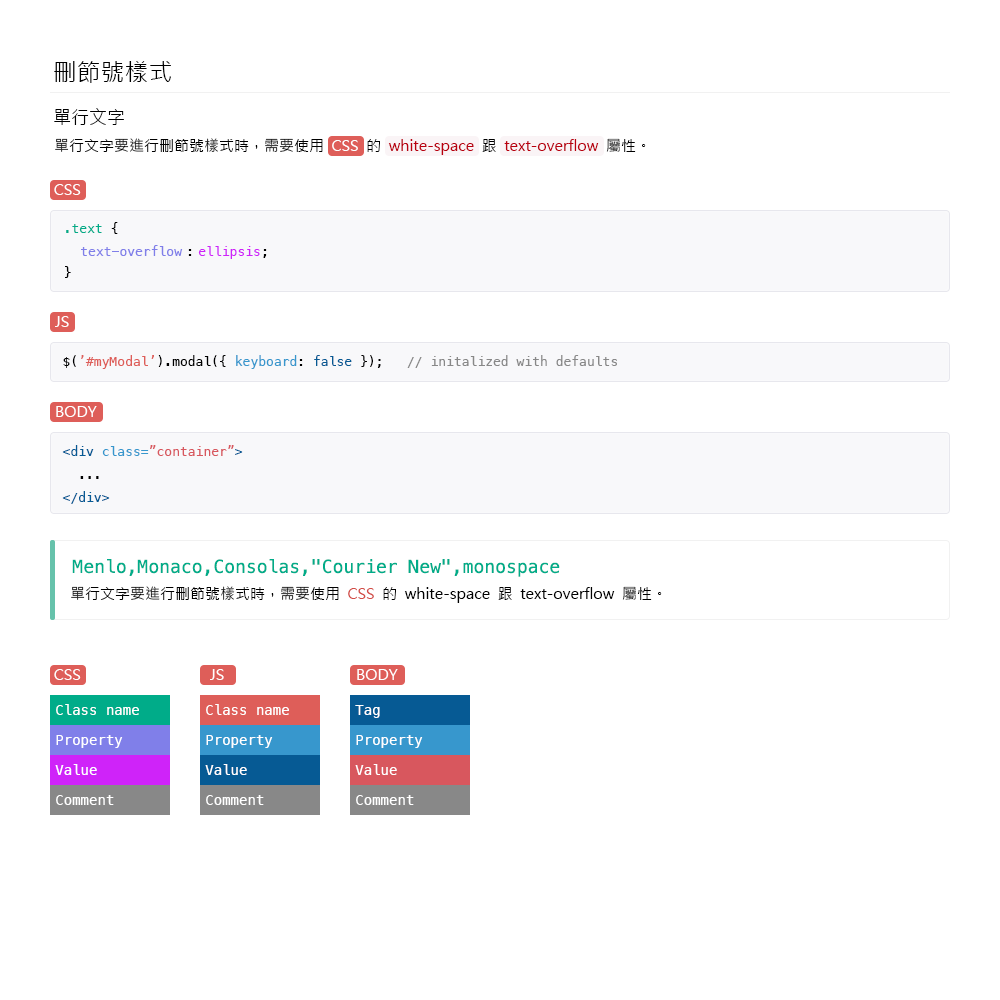
<style>
.page{position:relative;width:1000px;height:1000px;background:#ffffff}
.page>*{position:absolute;margin:0}
.t1{font:24px "MicrosoftJhengHeiRegular";color:#000000}
.t2{font:18px "MicrosoftJhengHeiRegular";color:#000000}
.t3{font:15px "MicrosoftJhengHeiRegular"}
.t4{font:15px "MicrosoftJhengHeiRegular";color:#ffffff}
.t5{font:13px/22px "Menlo-Regular";color:#00ac89}
.t6{font:13px/22px "Menlo-Regular";color:#000000}
.t7{font:13px "Menlo-Regular";color:#807fe9}
.t8{font:13px "Menlo-Regular";color:#cf23f9}
.t9{font:13px "Menlo-Regular";color:#000000}
.t10{font:13px "Menlo-Regular";color:#de5e59}
.t11{font:13px "Menlo-Regular";color:#888888}
.t12{font:13px "Menlo-Regular";color:#3797cd}
.t13{font:13px "Menlo-Regular";color:#065a94}
.t14{font:13px "Menlo-Regular";color:#d8575e}
.t15{font:18px "Menlo-Regular";color:#00ac89}
.t16{font:15px "MicrosoftJhengHeiRegular";color:#000000}
.t17{font:15px "MicrosoftJhengHeiRegular";color:#d34c46}
.t18{font:14px/30px "Menlo-Regular";color:#ffffff}
</style>
<div class="page">
<p class="t1" style="left:54px;top:61px;width:117px;height:22px">刪節號樣式</p>
<p class="t2" style="left:54px;top:108px;width:70px;height:17px">單行文字</p>
<p class="t3" style="left:55px;top:138px;width:591px;height:17px">單行文字要進行刪節號樣式時，需要使用  CSS  的  white-space  跟  text-overflow  屬性。</p>
<p class="t4" style="left:54px;top:184px;width:27px;height:11px">CSS</p>
<p class="t5" style="left:65px;top:222px;width:53px;height:56px">.text <span class="t6">{<br><br>}</span></p>
<p class="t7" style="left:81px;top:245px;width:102px;height:11px">text-overflow</p>
<p class="t8" style="left:198px;top:246px;width:62px;height:13px">ellipsis</p>
<p class="t9" style="left:188px;top:249px;width:4px;height:7px"><span class="t10">   <br></span>:</p>
<p class="t9" style="left:263px;top:249px;width:4px;height:9px">;</p>
<p class="t4" style="left:55px;top:316px;width:14px;height:11px">JS</p>
<p class="t11" style="left:63px;top:355px;width:554px;height:14px"><span class="t9">$(</span><span class="t10">’#myModal’</span><span class="t9">).modal({ </span><span class="t12">keyboard</span><span class="t9">: </span><span class="t13">false</span><span class="t9"> });   </span>// initalized with defaults</p>
<p class="t4" style="left:56px;top:406px;width:41px;height:11px">BODY</p>
<p class="t14" style="left:62px;top:445px;width:181px;height:59px"><span class="t13">&lt;div </span><span class="t12">class=</span>”container”<span class="t13">&gt;<br>  </span><span class="t9">...<br></span><span class="t13">&lt;/div&gt;</span></p>
<p class="t15" style="left:72px;top:559px;width:488px;height:18px">Menlo,Monaco,Consolas,"Courier New",monospace</p>
<p class="t16" style="left:71px;top:586px;width:591px;height:17px">單行文字要進行刪節號樣式時，需要使用  <span class="t17">CSS</span>  的  white-space  跟  text-overflow  屬性。</p>
<p class="t4" style="left:54px;top:669px;width:27px;height:11px">CSS</p>
<p class="t4" style="left:210px;top:669px;width:14px;height:11px">JS</p>
<p class="t4" style="left:357px;top:669px;width:41px;height:11px">BODY</p>
<p class="t18" style="left:55px;top:704px;width:84px;height:101px">Class name<br>Property<br>Value<br>Comment</p>
<p class="t18" style="left:205px;top:704px;width:84px;height:101px">Class name<br>Property<br>Value<br>Comment</p>
<p class="t18" style="left:355px;top:705px;width:68px;height:100px">Tag<br>Property<br>Value<br>Comment</p>
</div>
